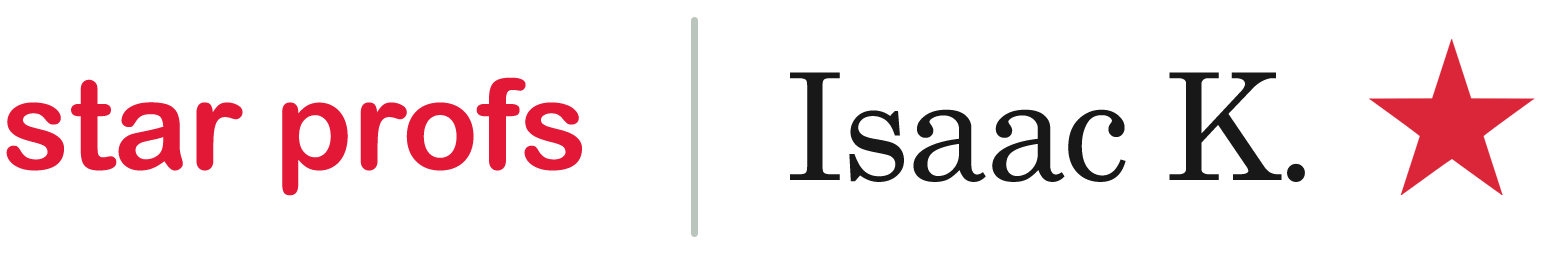
<style>
.page{position:relative;width:1545px;height:254px;background:#ffffff}
.page>*{position:absolute;margin:0}
.t1{font:125.1px "ArialRoundedMTBold";color:#e31837}
.t2{font:148.4px "Century";letter-spacing:-0.025em;color:#181818}
</style>
<div class="page">
<p class="t1" style="left:6px;top:77px;width:576px;height:119px">star profs</p>
<p class="t2" style="left:790px;top:72px;width:515px;height:110px">Isaac K.</p>
</div>
